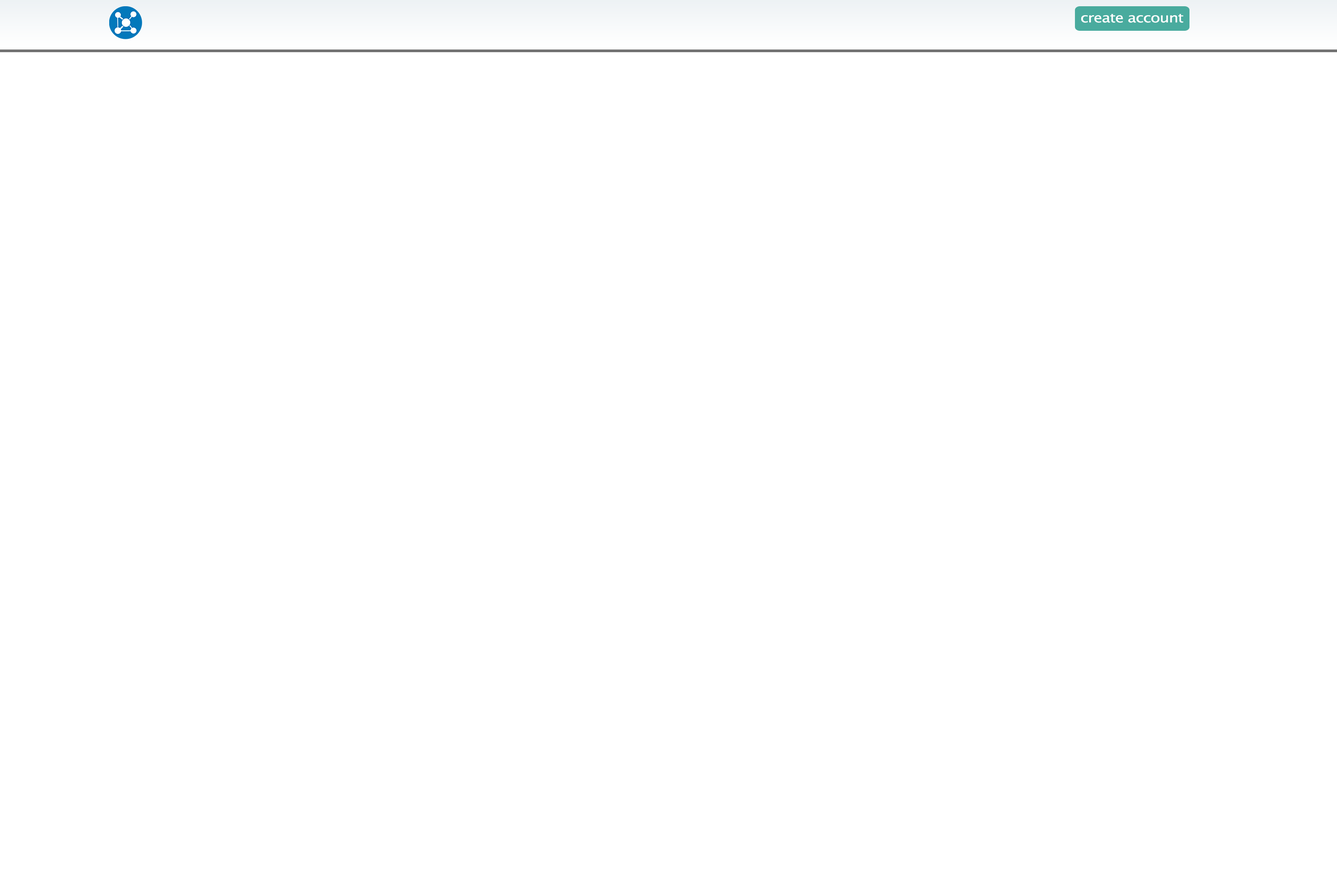
<style>
.page{position:relative;width:1337px;height:892px;background:#ffffff}
.page>*{position:absolute;margin:0}
.t1{font:13.1px "LucidaSansUnicode";letter-spacing:-0.04em;color:#ffffff;scale:1.2 1}
</style>
<div class="page">
<p class="t1" style="left:1082px;top:14px;width:102px;height:9px">create account</p>
</div>
